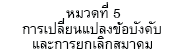
<style>
.page{position:relative;width:185px;height:50px;background:#ffffff}
.page>*{position:absolute;margin:0}
.t1{font:20px "BrowalliaUPC";color:#010304}
</style>
<div class="page">
<p class="t1" style="left:66px;top:2px;width:55px;height:16px">หมวดที่ 5</p>
<p class="t1" style="left:22px;top:18px;width:139px;height:16px">การเปลี่ยนแปลงข้อบังคับ</p>
<p class="t1" style="left:33px;top:36px;width:119px;height:13px">และการยกเลิกสมาคม</p>
</div>
